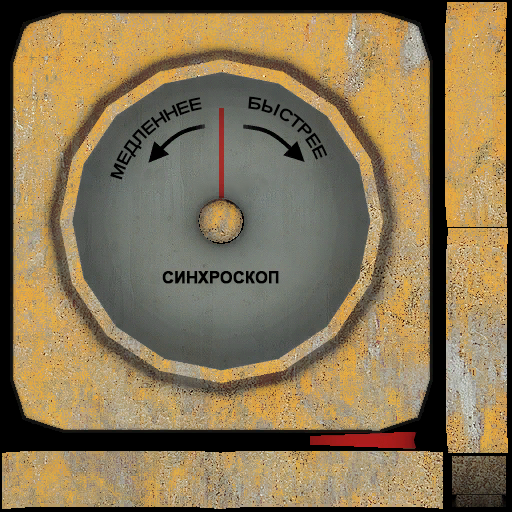
<style>
.page{position:relative;width:512px;height:512px}
.page>*{position:absolute;margin:0}
.t1{font:16px "Arial-BoldMT";color:#000000}
.t2{font:16px "Arial-BoldMT";color:#000000;font-weight:bold}
</style>
<div class="page">
<p class="t1" style="left:110px;top:97px;width:92px;height:83px;rotate:-41deg">МЕДЛЕННЕЕ</p>
<p class="t1" style="left:248px;top:96px;width:80px;height:64px;rotate:37deg">БЫСТРЕЕ</p>
<p class="t2" style="left:162px;top:271px;width:117px;height:13px">СИНХРОСКОП</p>
</div>
